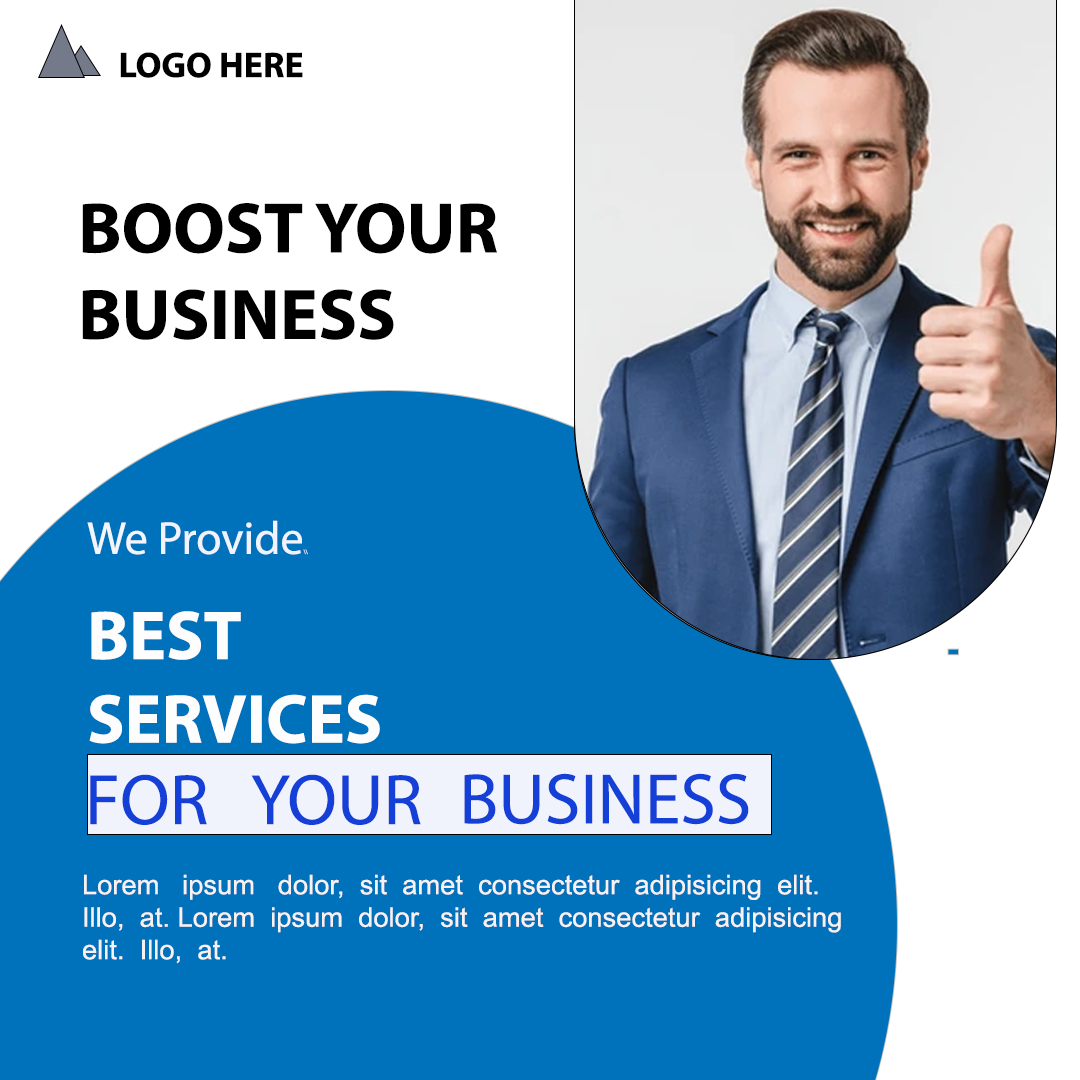
<style>
.page{position:relative;width:1080px;height:1080px;background:#0072bc}
.page>*{position:absolute;margin:0}
.t1{font:36px "MyriadPro-Bold";color:#000000}
.t2{font:72px "MyriadPro-Bold";color:#000000}
.t3{font:69.6px "MyriadPro-Bold";color:#fdfdfd}
.t4{font:46.4px "MyriadPro-Regular";color:#f2f5fc}
.t5{font:46.4px "MyriadPro-Regular";color:#f0f3fb}
.t6{font:6px "MyriadPro-Regular";color:#f0f3fb}
.t7{font:72px "MyriadPro-Regular";color:#1440d7}
.t8{font:27.1px "ArialMT";color:#f8f1f1}
</style>
<div class="page">
<p class="t1" style="left:120px;top:52px;width:183px;height:26px">LOGO HERE</p>
<p class="t2" style="left:82px;top:203px;width:415px;height:137px">BOOST YOUR<br>BUSINESS</p>
<p class="t3" style="left:87px;top:520px;width:293px;height:224px"><span class="t4">We </span><span class="t5">Provide</span><span class="t6">\\<br><br><br><br></span>BEST <br>SERVICES</p>
<p class="t7" style="left:90px;top:774px;width:331px;height:51px">FOR   YOUR BBUSINESS</p>
<p class="t7" style="left:464px;top:773px;width:285px;height:52px">BUSINESS</p>
<p class="t8" style="left:83px;top:874px;width:758px;height:90px">Lorem   ipsum   dolor,  sit  amet  consectetur  adipisicing  elit. <br>Illo,  at. Lorem  ipsum  dolor,  sit  amet  consectetur  adipisicing <br>elit.  Illo,  at.</p>
</div>
